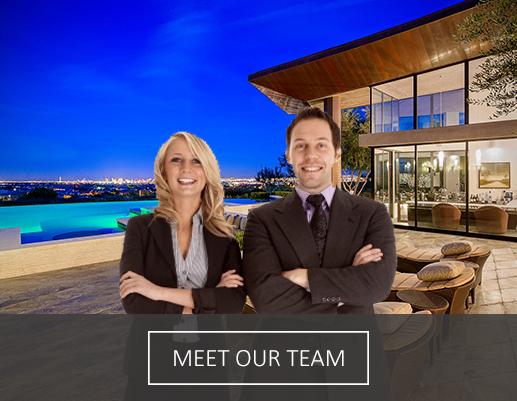
<style>
.page{position:relative;width:517px;height:401px}
.page>*{position:absolute;margin:0}
.t1{font:25px "Calibri-Light";color:#ffffff}
</style>
<div class="page">
<p class="t1" style="left:174px;top:350px;width:170px;height:17px">MEET OUR TEAM</p>
</div>
